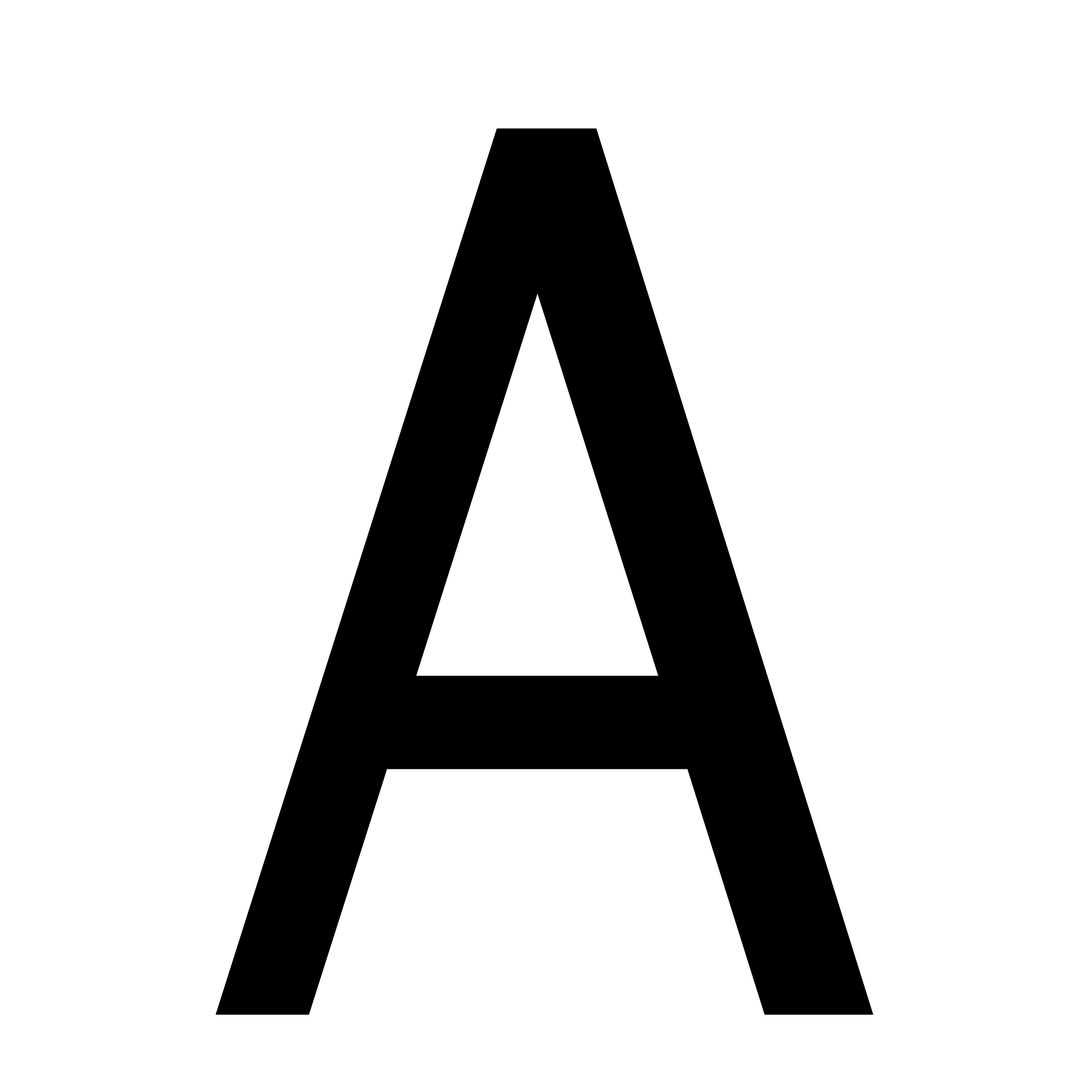
<style>
.page{position:relative;width:1092px;height:1092px;background:#ffffff}
.page>*{position:absolute;margin:0}
.t1{font:1226.4px "LucidaGrande";color:#000000;scale:0.8 1}
</style>
<div class="page">
<p class="t1" style="left:215px;top:128px;width:658px;height:887px">A</p>
</div>
